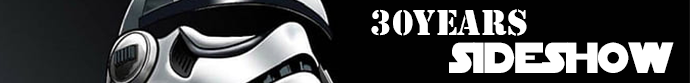
<style>
.page{position:relative;width:690px;height:83px;background:#010101}
.page>*{position:absolute;margin:0}
.t1{font:37.3px "Stencil";color:#ffffff}
.t2{font:40px "Star_Wars";letter-spacing:-0.05em;color:#ffffff}
</style>
<div class="page">
<p class="t1" style="left:371px;top:9px;width:156px;height:27px">30Years</p>
<p class="t2" style="left:449px;top:42px;width:225px;height:31px">sideshow</p>
</div>
